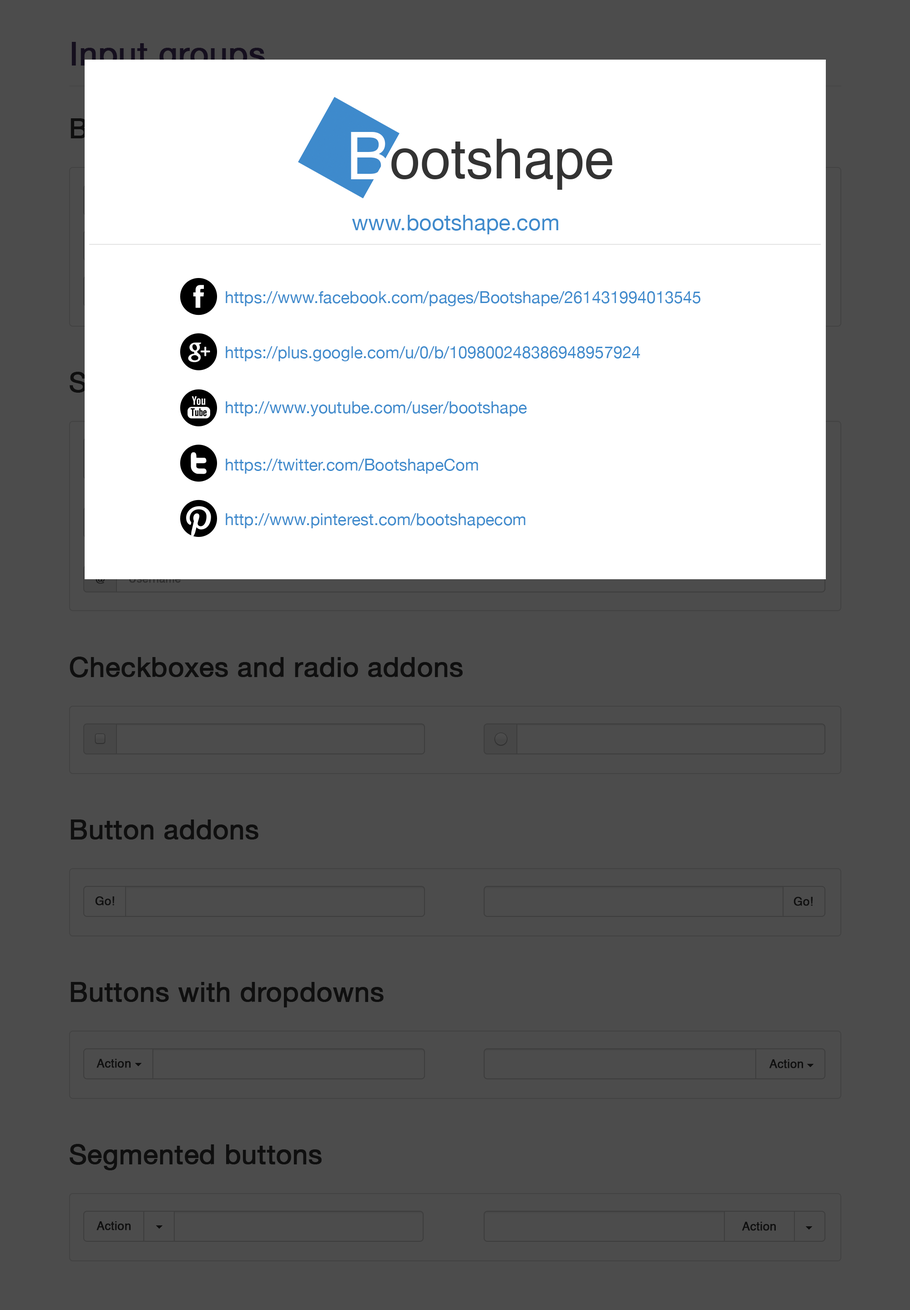
<style>
.page{position:relative;width:910px;height:1310px;background:#4c4c4c}
.page>*{position:absolute;margin:0}
.t1{font:21.8px "HelveticaNeue";color:#3e8acc}
.t2{font:16.4px "HelveticaNeue";color:#3e8acc}
.t3{font:27.3px "HelveticaNeue";color:#0f0f0f;font-weight:bold}
.t4{font:11.8px "Helvetica";color:#0f0f0f;font-weight:bold}
</style>
<div class="page">
<p class="t1" style="left:352px;top:215px;width:206px;height:19px">www.bootshape.com</p>
<p class="t2" style="left:226px;top:291px;width:475px;height:15px">https://www.facebook.com/pages/Bootshape/261431994013545</p>
<p class="t2" style="left:226px;top:346px;width:414px;height:15px">https://plus.google.com/u/0/b/109800248386948957924</p>
<p class="t2" style="left:226px;top:401px;width:301px;height:15px">http://www.youtube.com/user/bootshape</p>
<p class="t2" style="left:226px;top:459px;width:252px;height:15px">https://twitter.com/BootshapeCom</p>
<p class="t2" style="left:226px;top:513px;width:300px;height:15px">http://www.pinterest.com/bootshapecom</p>
<p class="t3" style="left:70px;top:657px;width:393px;height:21px">Checkboxes and radio addons</p>
<p class="t3" style="left:71px;top:820px;width:187px;height:20px">Button addons</p>
<p class="t4" style="left:95px;top:896px;width:19px;height:10px">Go!</p>
<p class="t4" style="left:794px;top:897px;width:19px;height:9px">Go!</p>
<p class="t3" style="left:71px;top:982px;width:313px;height:26px">Buttons with dropdowns</p>
<p class="t4" style="left:96px;top:1059px;width:35px;height:9px">Action</p>
<p class="t4" style="left:770px;top:1059px;width:33px;height:10px">Action</p>
<p class="t3" style="left:70px;top:1144px;width:252px;height:26px">Segmented buttons</p>
<p class="t4" style="left:96px;top:1221px;width:35px;height:10px">Action</p>
<p class="t4" style="left:742px;top:1222px;width:34px;height:9px">Action</p>
</div>
